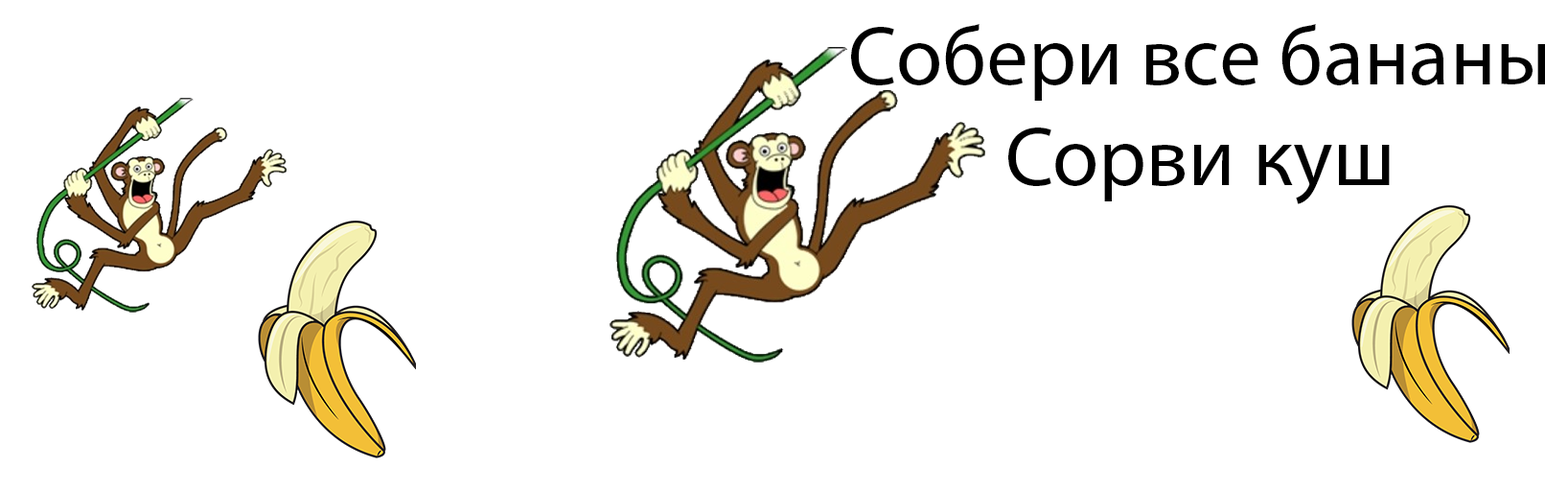
<style>
.page{position:relative;width:1568px;height:491px;background:#ffffff}
.page>*{position:absolute;margin:0}
.t1{font:83.9px "MyriadPro-Regular";color:#000000}
</style>
<div class="page">
<p class="t1" style="left:851px;top:24px;width:694px;height:180px;text-align:center">Собери все бананы<br>Сорви куш</p>
</div>
